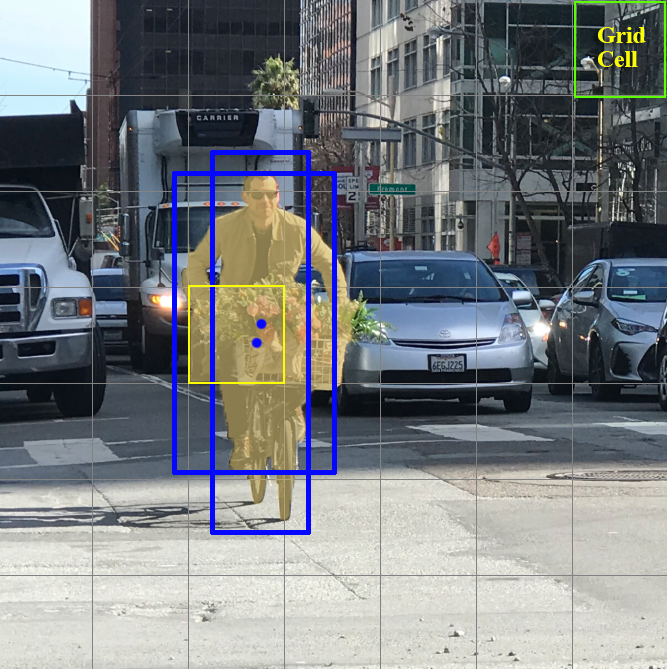
<style>
.page{position:relative;width:667px;height:669px}
.page>*{position:absolute;margin:0}
.t1{font:24px/1.8px "TimesNewRomanPS-BoldMT";letter-spacing:-0.01em;color:#fbfd05}
</style>
<div class="page">
<p class="t1" style="left:598px;top:27px;width:48px;height:40px">Grid<br><br>Cell</p>
</div>
